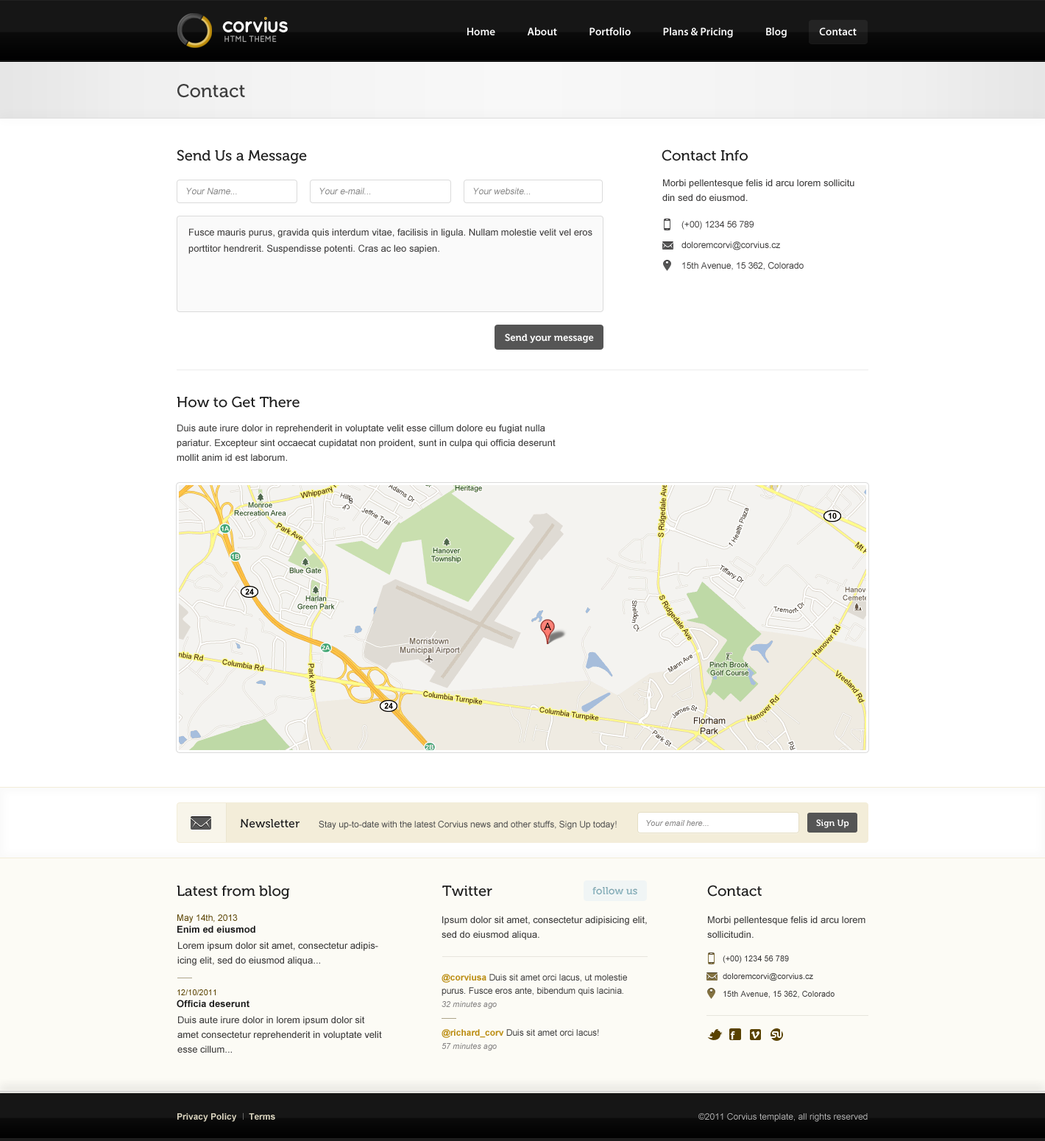
<style>
.page{position:relative;width:1045px;height:1141px;background:#ffffff}
.page>*{position:absolute;margin:0}
.t1{font:11px "MyriadPro-Semibold";color:#fefefe}
.t2{font:8.8px "QuicksandBold-Regular";letter-spacing:-0.05em;color:#a0a0a0;text-transform:uppercase}
.t3{font:18.4px "Museo-500";color:#3f3f3f}
.t4{font:14.7px "Museo-500";color:#202020}
.t5{font:9.6px/14.7px "ArialMT";color:#3d3c3c}
.t6{font:8.8px "ArialMT";color:#858585;font-style:italic}
.t7{font:8.8px "ArialMT";color:#3d3c3c}
.t8{font:9.6px/16.2px "ArialMT";color:#414040}
.t9{font:9.6px "Museo-700";color:#ffffff}
.t10{font:11.8px "Museo-500";color:#181818}
.t11{font:8.8px "ArialMT";color:#4c4c4c}
.t12{font:8.1px "Arial-ItalicMT";color:#868585}
.t13{font:8.8px "Museo-700";color:#ffffff}
.t14{font:10.3px "Museo-700";color:#99c3ce}
.t15{font:9.6px/11.8px "Arial-BoldMT";color:#181818}
.t16{font:8.8px/11.8px "ArialMT";color:#594200}
.t17{font:8.1px "ArialMT";color:#3d3c3c}
.t18{font:8.8px/13.2px "ArialMT";color:#3d3c3c}
.t19{font:8.8px/13.2px "Arial-BoldMT";color:#bc8e14}
.t20{font:8.1px/13.2px "Arial-ItalicMT";color:#858383}
.t21{font:8.1px/11.8px "ArialMT";color:#594200}
.t22{font:8.8px "Arial-BoldMT";color:#dcd6c1}
.t23{font:8.8px "ArialMT";color:#b2b2b2}
</style>
<div class="page">
<p class="t1" style="left:467px;top:27px;width:390px;height:11px">Home              About              Portfolio              Plans &amp; Pricing              Blog              Contact</p>
<p class="t2" style="left:224px;top:35px;width:53px;height:7px">HTML Theme</p>
<p class="t3" style="left:177px;top:84px;width:68px;height:14px">Contact</p>
<p class="t4" style="left:177px;top:149px;width:130px;height:15px">Send Us a Message</p>
<p class="t4" style="left:662px;top:149px;width:86px;height:12px">Contact Info</p>
<p class="t5" style="left:662px;top:179px;width:193px;height:22px">Morbi pellentesque felis id arcu lorem sollicitu din sed do eiusmod.</p>
<p class="t6" style="left:186px;top:188px;width:51px;height:6px">Your Name...</p>
<p class="t6" style="left:319px;top:188px;width:52px;height:6px">Your e-mail...</p>
<p class="t6" style="left:473px;top:188px;width:58px;height:6px">Your website...</p>
<p class="t7" style="left:682px;top:221px;width:72px;height:9px">(+00) 1234 56 789</p>
<p class="t8" style="left:188px;top:228px;width:405px;height:26px">Fusce mauris purus, gravida quis interdum vitae, facilisis in ligula. Nullam molestie velit vel eros porttitor hendrerit. Suspendisse potenti. Cras ac leo sapien.</p>
<p class="t7" style="left:682px;top:241px;width:98px;height:9px">doloremcorvi@corvius.cz</p>
<p class="t7" style="left:682px;top:262px;width:122px;height:8px">15th Avenue, 15 362, Colorado</p>
<p class="t9" style="left:505px;top:333px;width:89px;height:10px">Send your message</p>
<p class="t4" style="left:177px;top:396px;width:123px;height:12px">How to Get There</p>
<p class="t5" style="left:177px;top:424px;width:379px;height:37px">Duis aute irure dolor in reprehenderit in voluptate velit esse cillum dolore eu fugiat nulla pariatur. Excepteur sint occaecat cupidatat non proident, sunt in culpa qui officia deserunt mollit anim id est laborum.</p>
<p class="t10" style="left:240px;top:818px;width:60px;height:10px">Newsletter</p>
<p class="t11" style="left:319px;top:821px;width:298px;height:9px">Stay up-to-date with the latest Corvius news and other stuffs, Sign Up today!</p>
<p class="t12" style="left:646px;top:820px;width:63px;height:6px">Your email here...</p>
<p class="t13" style="left:816px;top:819px;width:33px;height:9px">Sign Up</p>
<p class="t4" style="left:177px;top:885px;width:113px;height:14px">Latest from blog</p>
<p class="t4" style="left:442px;top:885px;width:50px;height:12px">Twitter</p>
<p class="t14" style="left:593px;top:887px;width:44px;height:8px">follow us</p>
<p class="t4" style="left:707px;top:885px;width:55px;height:12px">Contact</p>
<p class="t15" style="left:177px;top:914px;width:78px;height:19px"><span class="t16">May 14th, 2013<br></span>Enim ed eiusmod</p>
<p class="t5" style="left:442px;top:916px;width:205px;height:24px">Ipsum dolor sit amet, consectetur adipisicing elit, sed do eiusmod aliqua.</p>
<p class="t5" style="left:707px;top:916px;width:159px;height:22px">Morbi pellentesque felis id arcu lorem sollicitudin.</p>
<p class="t5" style="left:177px;top:941px;width:201px;height:25px">Lorem ipsum dolor sit amet, consectetur adipisicing elit, sed do eiusmod aliqua...</p>
<p class="t17" style="left:723px;top:955px;width:66px;height:8px">(+00) 1234 56 789</p>
<p class="t18" style="left:442px;top:974px;width:185px;height:35px"><span class="t19">@corviusa </span>Duis sit amet orci lacus, ut molestie purus. Fusce eros ante, bibendum quis lacinia.<br><span class="t20">32 minutes ago</span></p>
<p class="t17" style="left:723px;top:973px;width:90px;height:8px">doloremcorvi@corvius.cz</p>
<p class="t15" style="left:177px;top:989px;width:73px;height:19px"><span class="t21">12/10/2011<br></span>Officia deserunt</p>
<p class="t17" style="left:724px;top:991px;width:111px;height:7px">15th Avenue, 15 362, Colorado</p>
<p class="t5" style="left:177px;top:1016px;width:205px;height:37px">Duis aute irure dolor in lorem ipsum dolor sit amet consectetur reprehenderit in voluptate velit esse cillum...</p>
<p class="t18" style="left:442px;top:1029px;width:157px;height:22px"><span class="t19">@richard_corv </span>Duis sit amet orci lacus!<br><span class="t20">57 minutes ago</span></p>
<p class="t22" style="left:177px;top:1113px;width:98px;height:9px">Privacy Policy     Terms</p>
<p class="t23" style="left:699px;top:1113px;width:169px;height:9px">©2011 Corvius template, all rights reserved</p>
</div>
